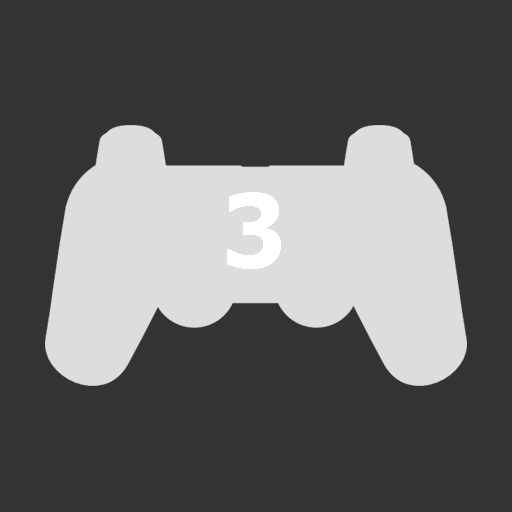
<style>
.page{position:relative;width:512px;height:512px;background:#333333}
.page>*{position:absolute;margin:0}
.t1{font:100px "Tahoma-Bold";color:#ffffff}
</style>
<div class="page">
<p class="t1" style="left:227px;top:192px;width:54px;height:77px">3</p>
</div>
